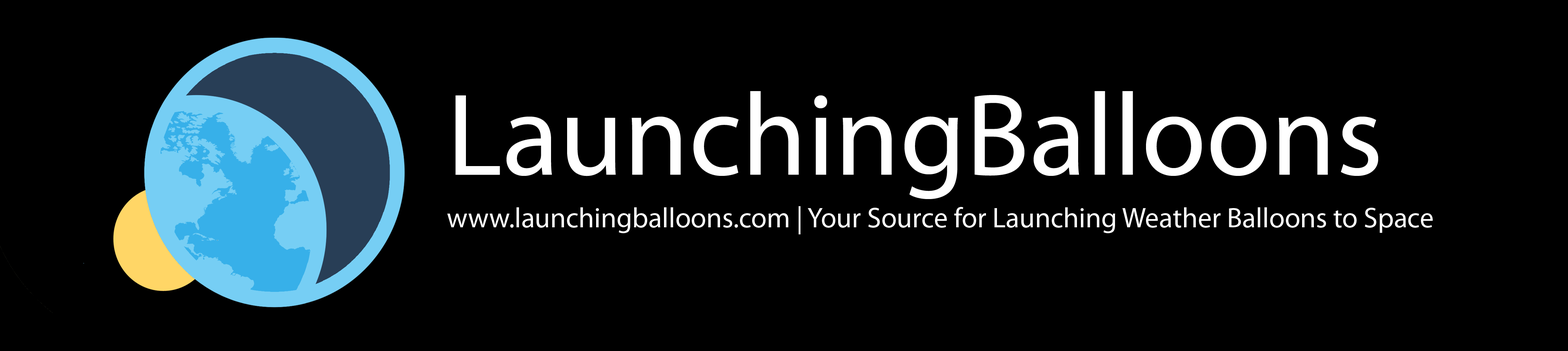
<style>
.page{position:relative;width:1568px;height:351px;background:#000000}
.page>*{position:absolute;margin:0}
.t1{font:117.7px "MyriadPro-Regular";color:#ffffff}
.t2{font:28.2px "MyriadPro-Regular";color:#ffffff}
</style>
<div class="page">
<p class="t1" style="left:455px;top:91px;width:923px;height:108px">LaunchingBalloons</p>
<p class="t2" style="left:447px;top:206px;width:986px;height:28px">www.launchingballoons.com | Your Source for Launching Weather Balloons to Space</p>
</div>
